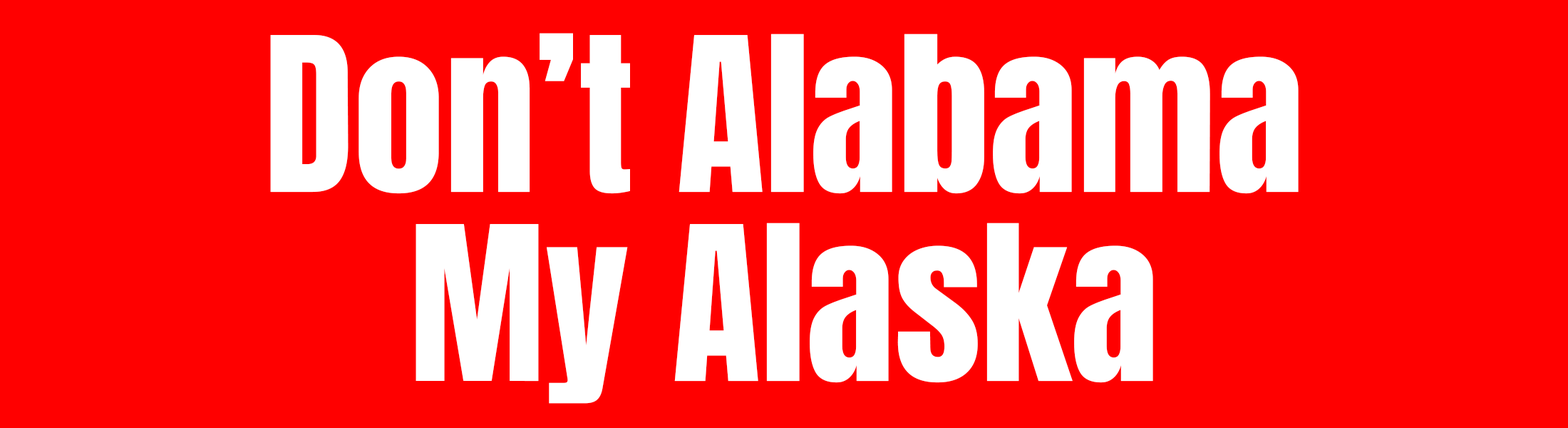
<style>
.page{position:relative;width:1568px;height:428px;background:#ff0000}
.page>*{position:absolute;margin:0}
.t1{font:182.5px "Anton-Regular";color:#ffffff}
</style>
<div class="page">
<p class="t1" style="left:270px;top:33px;width:1029px;height:161px">Don’t Alabama</p>
<p class="t1" style="left:416px;top:222px;width:737px;height:181px">My Alaska</p>
</div>
